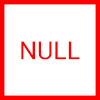
<style>
.page{position:relative;width:100px;height:100px;background:#ffffff}
.page>*{position:absolute;margin:0}
.t1{font:25px "Roboto-Regular";color:#ff0000}
</style>
<div class="page">
<p class="t1" style="left:21px;top:41px;width:59px;height:19px">NULL</p>
</div>
